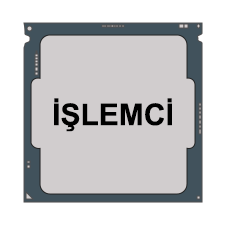
<style>
.page{position:relative;width:225px;height:225px;background:#d1cdce}
.page>*{position:absolute;margin:0}
.t1{font:30px "Arial-BoldMT";color:#000000}
</style>
<div class="page">
<p class="t1" style="left:54px;top:98px;width:118px;height:34px">İŞLEMCİ</p>
</div>
